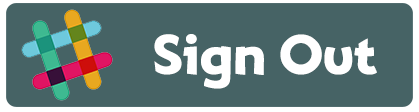
<style>
.page{position:relative;width:419px;height:112px;background:#466365}
.page>*{position:absolute;margin:0}
.t1{font:48.9px "Adventuring";letter-spacing:-0.02em;color:#ffffff}
</style>
<div class="page">
<p class="t1" style="left:154px;top:34px;width:223px;height:55px">Sign Out</p>
</div>
